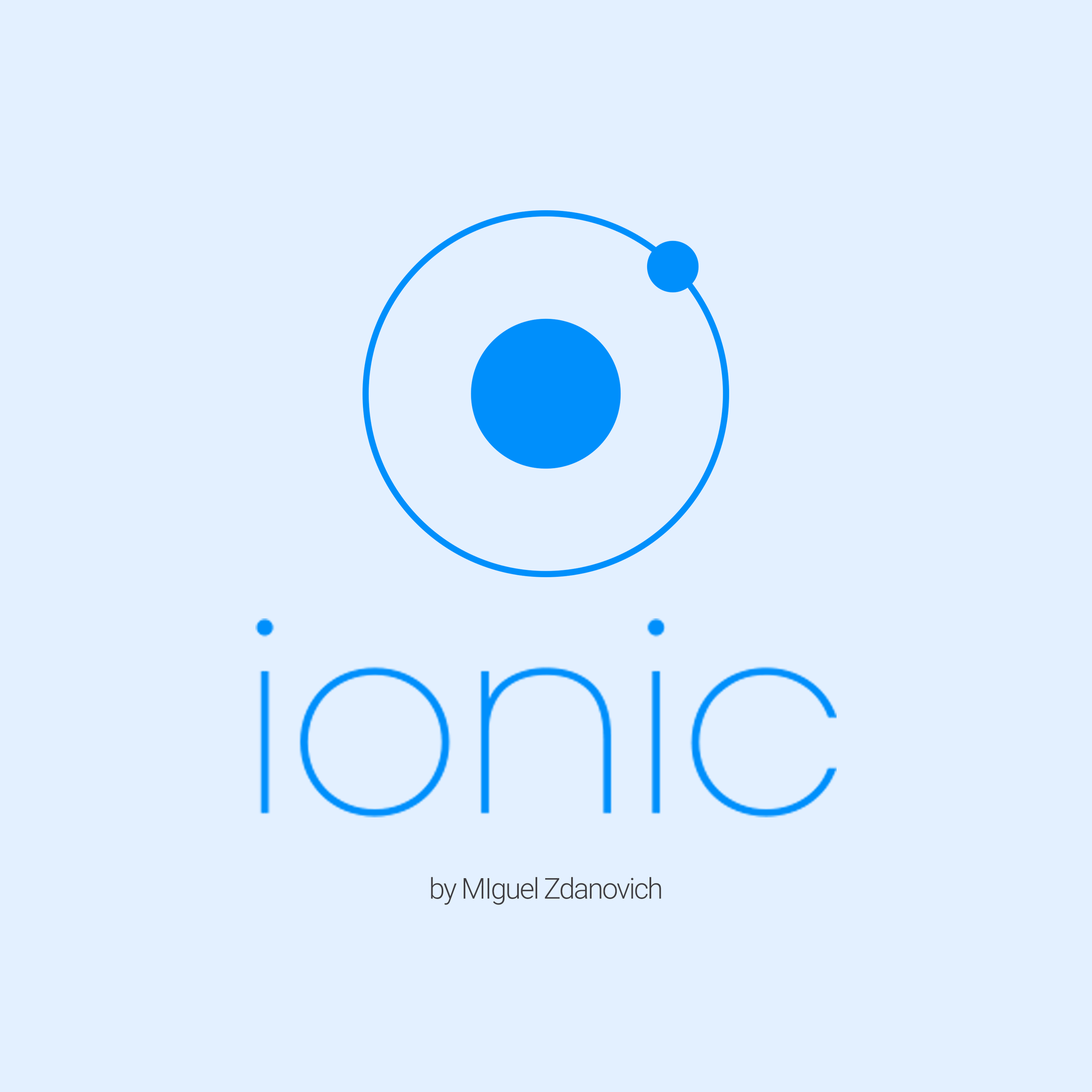
<style>
.page{position:relative;width:1092px;height:1092px;background:#e3f0ff}
.page>*{position:absolute;margin:0}
.t1{font:28.8px "Roboto-Light";letter-spacing:-0.05em;color:#3f3e41}
</style>
<div class="page">
<p class="t1" style="left:431px;top:877px;width:230px;height:28px">by MIguel Zdanovich</p>
</div>
